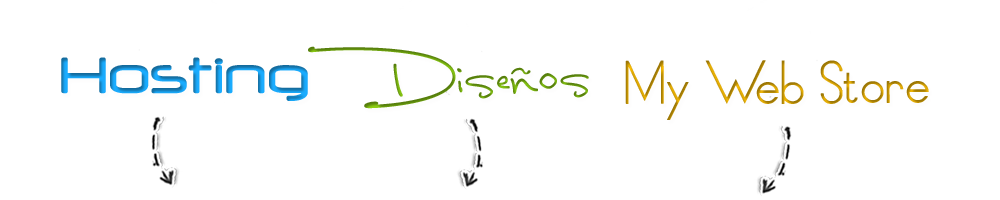
<style>
.page{position:relative;width:1000px;height:200px;background:#ffffff}
.page>*{position:absolute;margin:0}
.t1{font:50px "LunaBar";color:#618e0e}
.t2{font:60px "Neuropol"}
.t3{font:48px "ThinLinesandCurves"}
</style>
<div class="page">
<p class="t1" style="left:308px;top:46px;width:281px;height:63px;rotate:-1deg">Diseños</p>
<p class="t2" style="left:61px;top:57px;width:247px;height:44px">Hosting</p>
<p class="t3" style="left:625px;top:60px;width:304px;height:60px">My Web Store</p>
</div>
